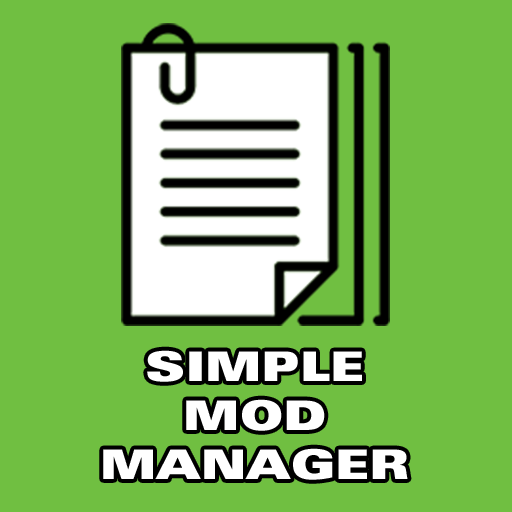
<style>
.page{position:relative;width:512px;height:512px;background:#70bf41}
.page>*{position:absolute;margin:0}
.t1{font:40.8px "UniversLT-ExtraBlackExt";color:#ffffff}
</style>
<div class="page">
<p class="t1" style="left:103px;top:350px;width:305px;height:130px;text-align:center">SIMPLE<br>MOD<br>MANAGER</p>
</div>
